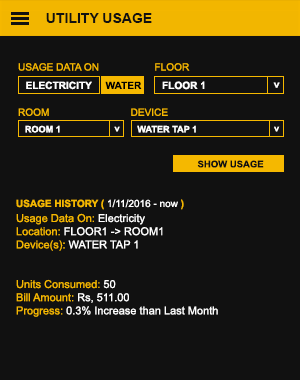
<style>
.page{position:relative;width:300px;height:380px;background:#111111}
.page>*{position:absolute;margin:0}
.t1{font:14px "Arial-BoldMT";color:#111111}
.t2{font:10.1px "ArialMT";color:#f5b800}
.t3{font:10.1px "Arial-BoldMT";color:#ffffff;text-transform:uppercase}
.t4{font:10.1px "Arial-BoldMT";color:#000000;text-transform:uppercase}
.t5{font:10.1px "Arial-BoldMT";color:#ffffff}
.t6{font:9.1px "Arial-BoldMT";color:#ffffff;text-transform:uppercase}
.t7{font:9.1px "Arial-BoldMT";color:#ffffff}
.t8{font:9.3px "Arial-BoldMT";color:#111111;text-transform:uppercase}
.t9{font:10px "Arial-BoldMT";color:#f5b800}
.t10{font:10px "ArialMT";color:#ffffff}
.t11{font:11px "ArialMT";color:#ffffff}
.t12{font:11px "ArialMT";color:#f5b800}
</style>
<div class="page">
<p class="t1" style="left:46px;top:13px;width:106px;height:10px">UTILITY USAGE</p>
<p class="t2" style="left:18px;top:63px;width:81px;height:8px">USAGE DATA ON</p>
<p class="t2" style="left:155px;top:63px;width:35px;height:8px">FLOOR</p>
<p class="t3" style="left:26px;top:81px;width:66px;height:9px">Electricity</p>
<p class="t4" style="left:105px;top:81px;width:37px;height:8px">WATER</p>
<p class="t3" style="left:162px;top:81px;width:43px;height:9px">FLOOR 1</p>
<p class="t5" style="left:273px;top:82px;width:7px;height:6px;rotate:-90deg">&lt;</p>
<p class="t2" style="left:18px;top:108px;width:31px;height:8px">ROOM</p>
<p class="t2" style="left:131px;top:108px;width:37px;height:8px">DEVICE</p>
<p class="t6" style="left:25px;top:125px;width:35px;height:8px">ROOM 1</p>
<p class="t7" style="left:114px;top:126px;width:6px;height:6px;rotate:-90deg">&lt;</p>
<p class="t6" style="left:137px;top:125px;width:59px;height:8px">WATER TAP 1</p>
<p class="t7" style="left:274px;top:126px;width:6px;height:6px;rotate:-90deg">&lt;</p>
<p class="t8" style="left:197px;top:160px;width:67px;height:8px">Show Usage</p>
<p class="t9" style="left:16px;top:199px;width:168px;height:11px">USAGE HISTORY ( <span class="t10">1/11/2016 - now </span>)</p>
<p class="t11" style="left:16px;top:213px;width:202px;height:104px"><span class="t12">Usage Data On: </span>Electricity<br><span class="t12">Location: </span>FLOOR1 -&gt; ROOM1<br><span class="t12">Device(s):</span> WATER TAP 1<br><br><br><span class="t12">Units Consumed: </span>50<span class="t12">     <br>Bill Amount: </span>Rs, 511.00<br><span class="t12">Progress:</span> 0.3% Increase than Last Month</p>
</div>
